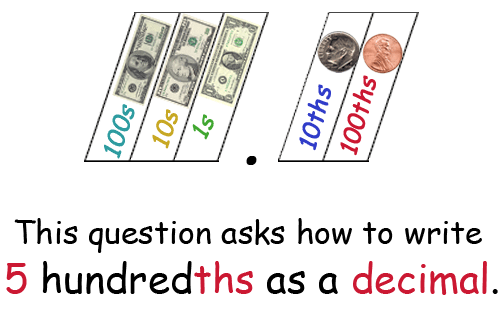
<style>
.page{position:relative;width:500px;height:309px;background:#ffffff}
.page>*{position:absolute;margin:0}
.t1{font:32px "ComicSansMS";color:#000000}
.t2{font:40px "ComicSansMS";color:#000000}
.t3{font:40px "ComicSansMS";color:#cb1832}
</style>
<div class="page">
<p class="t1" style="left:14px;top:218px;width:468px;height:35px">This question asks how to write</p>
<p class="t2" style="left:6px;top:261px;width:492px;height:34px"><span class="t3">5 </span>hundred<span class="t3">ths</span> as a<span class="t3"> decimal</span>.</p>
</div>
